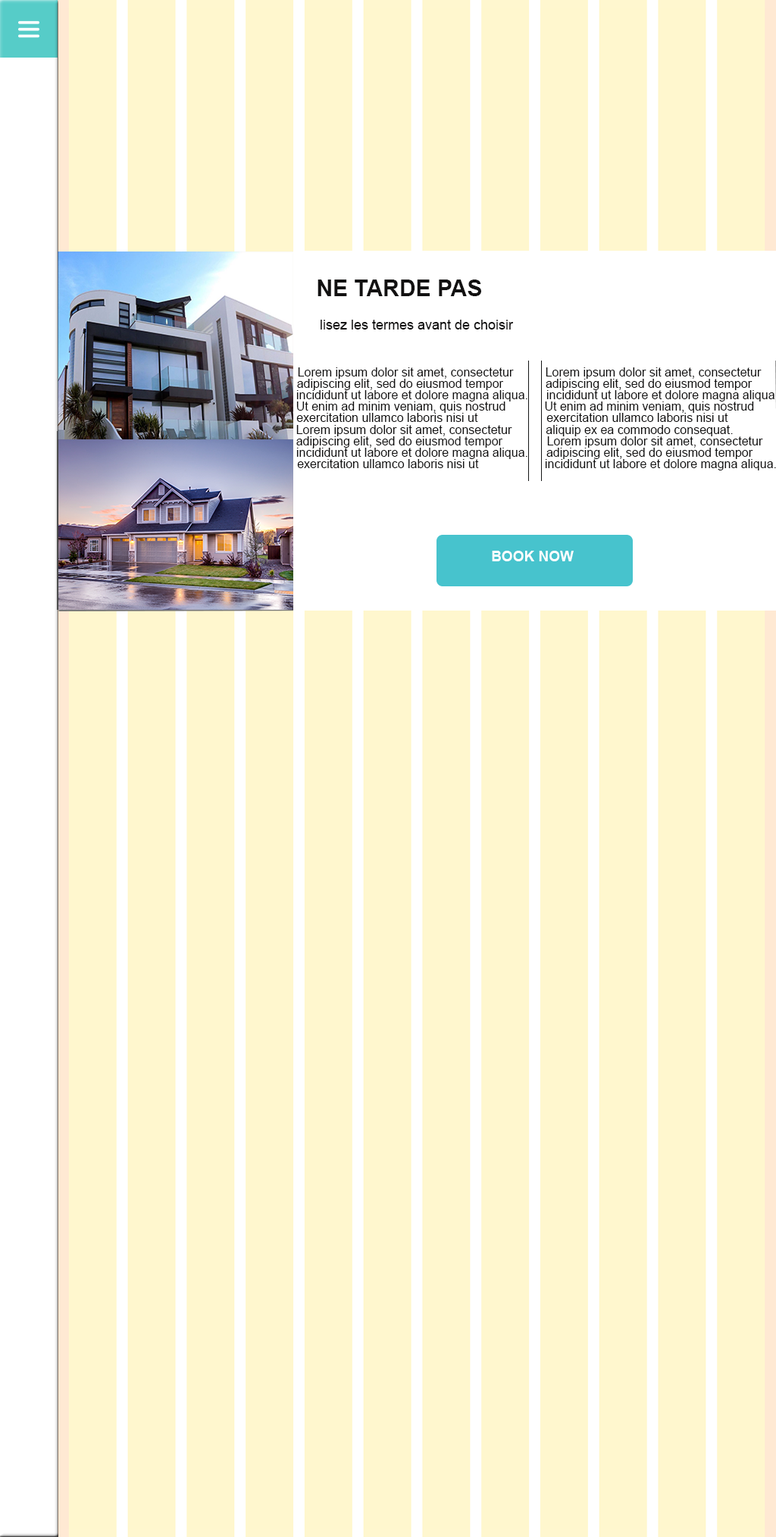
<style>
.page{position:relative;width:776px;height:1537px;background:#fff7ce}
.page>*{position:absolute;margin:0}
.t1{font:22.7px "Arial-BoldMT";color:#121111}
.t2{font:13.6px "ArialMT";color:#121111}
.t3{font:12.1px "ArialMT";color:#121111}
.t4{font:14.4px "Arial-BoldMT";color:#ffffff}
</style>
<div class="page">
<p class="t1" style="left:317px;top:280px;width:164px;height:16px">NE TARDE PAS</p>
<p class="t2" style="left:320px;top:320px;width:194px;height:10px">lisez les termes avant de choisir</p>
<p class="t3" style="left:298px;top:367px;width:216px;height:12px">Lorem ipsum dolor sit amet, consectetur</p>
<p class="t3" style="left:545px;top:367px;width:216px;height:12px">Lorem ipsum dolor sit amet, consectetur</p>
<p class="t3" style="left:297px;top:379px;width:206px;height:11px">adipiscing elit, sed do eiusmod tempor</p>
<p class="t3" style="left:545px;top:379px;width:207px;height:11px">adipiscing elit, sed do eiusmod tempor</p>
<p class="t3" style="left:296px;top:390px;width:231px;height:12px">incididunt ut labore et dolore magna aliqua.</p>
<p class="t3" style="left:296px;top:402px;width:209px;height:11px">Ut enim ad minim veniam, quis nostrud</p>
<p class="t3" style="left:545px;top:402px;width:209px;height:11px">Ut enim ad minim veniam, quis nostrud</p>
<p class="t3" style="left:546px;top:390px;width:231px;height:12px">incididunt ut labore et dolore magna aliqua.</p>
<p class="t3" style="left:296px;top:413px;width:182px;height:9px">exercitation ullamco laboris nisi ut</p>
<p class="t3" style="left:546px;top:413px;width:182px;height:9px">exercitation ullamco laboris nisi ut</p>
<p class="t3" style="left:296px;top:425px;width:216px;height:11px">Lorem ipsum dolor sit amet, consectetur</p>
<p class="t3" style="left:545px;top:425px;width:188px;height:11px">aliquip ex ea commodo consequat.</p>
<p class="t3" style="left:296px;top:436px;width:206px;height:12px">adipiscing elit, sed do eiusmod tempor</p>
<p class="t3" style="left:547px;top:436px;width:216px;height:12px">Lorem ipsum dolor sit amet, consectetur</p>
<p class="t3" style="left:296px;top:448px;width:231px;height:11px">incididunt ut labore et dolore magna aliqua.</p>
<p class="t3" style="left:546px;top:448px;width:207px;height:11px">adipiscing elit, sed do eiusmod tempor</p>
<p class="t3" style="left:297px;top:459px;width:182px;height:9px">exercitation ullamco laboris nisi ut</p>
<p class="t3" style="left:545px;top:459px;width:231px;height:11px">incididunt ut labore et dolore magna aliqua.</p>
<p class="t4" style="left:492px;top:551px;width:81px;height:10px">BOOK NOW</p>
</div>
